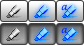
<style>
.page{position:relative;width:84px;height:46px}
.page>*{position:absolute;margin:0}
.t1{font:18px "SavoyeLetPlain";color:#0029ff}
</style>
<div class="page">
<p class="t1" style="left:61px;top:4px;width:7px;height:7px">a</p>
<p class="t1" style="left:61px;top:27px;width:7px;height:7px">a</p>
</div>
